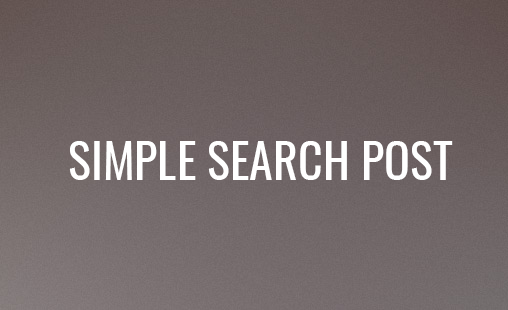
<style>
.page{position:relative;width:508px;height:310px}
.page>*{position:absolute;margin:0}
.t1{font:48px "Oswald-Regular";color:#ffffff;font-variant:small-caps}
</style>
<div class="page">
<p class="t1" style="left:69px;top:141px;width:384px;height:39px">SIMPLE SEARCH POST</p>
</div>
